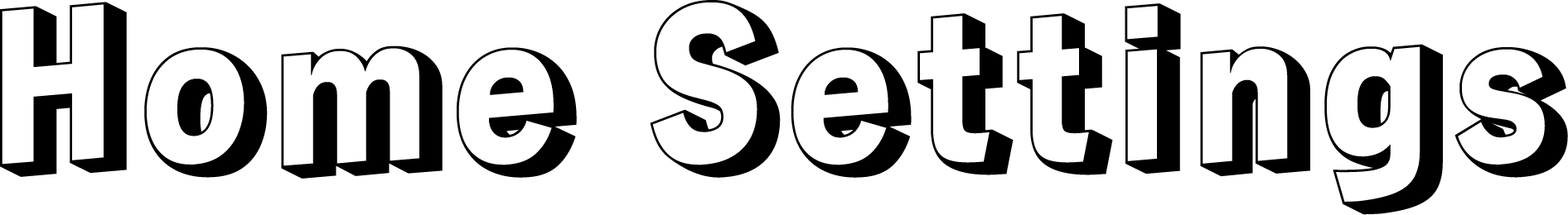
<style>
.page{position:relative;width:1568px;height:215px;background:#ffffff}
.page>*{position:absolute;margin:0}
.t1{font:207.2px "RampartOne-Regular";color:#000000}
</style>
<div class="page">
<p class="t1" style="left:0px;top:0px;width:1568px;height:215px">Home Settings</p>
</div>
